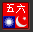
<style>
.page{position:relative;width:33px;height:32px;background:#f20000}
.page>*{position:absolute;margin:0}
.t1{font:10.4px "SimSun";color:#ffffff}
</style>
<div class="page">
<p class="t1" style="left:7px;top:4px;width:18px;height:9px">五六</p>
</div>
